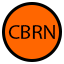
<style>
.page{position:relative;width:64px;height:64px;background:#ff6600}
.page>*{position:absolute;margin:0}
.t1{font:20.8px "MyriadPro-Regular";color:#000000}
</style>
<div class="page">
<p class="t1" style="left:8px;top:25px;width:47px;height:14px">CBRN</p>
</div>
